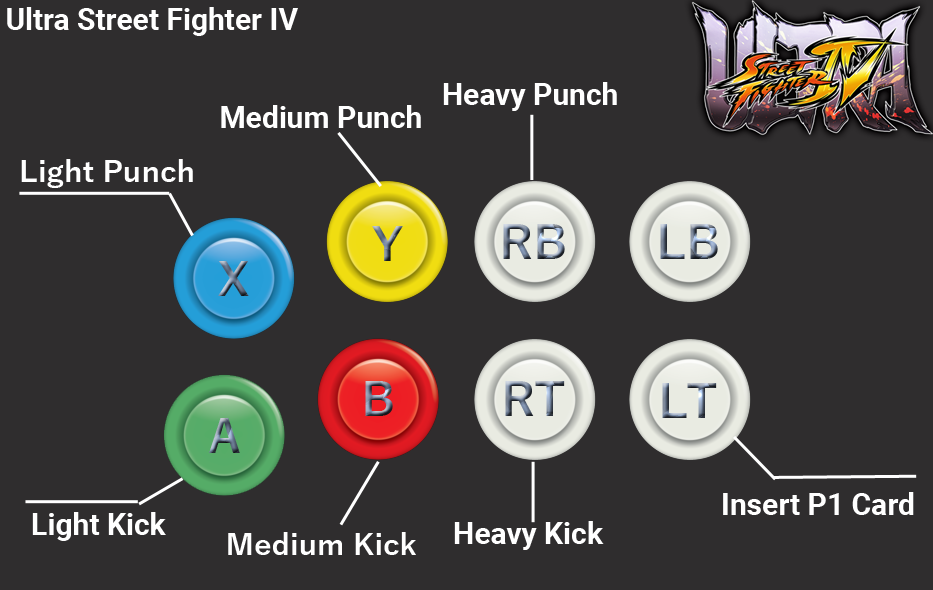
<style>
.page{position:relative;width:933px;height:590px;background:#2f2d2e}
.page>*{position:absolute;margin:0}
.t1{font:30px "Roboto-Bold";color:#ffffff}
.t2{font:30px "YuGothic-Bold";color:#ffffff}
</style>
<div class="page">
<p class="t1" style="left:7px;top:7px;width:291px;height:29px">Ultra Street Fighter IV</p>
<p class="t1" style="left:443px;top:82px;width:174px;height:29px">Heavy Punch</p>
<p class="t1" style="left:221px;top:105px;width:200px;height:23px">Medium Punch</p>
<p class="t2" style="left:21px;top:159px;width:172px;height:29px">Light Punch</p>
<p class="t1" style="left:723px;top:492px;width:191px;height:23px">Insert P1 Card</p>
<p class="t1" style="left:32px;top:512px;width:134px;height:29px">Light Kick</p>
<p class="t1" style="left:454px;top:521px;width:150px;height:29px">Heavy Kick</p>
<p class="t2" style="left:228px;top:532px;width:188px;height:23px">Medium Kick</p>
</div>
